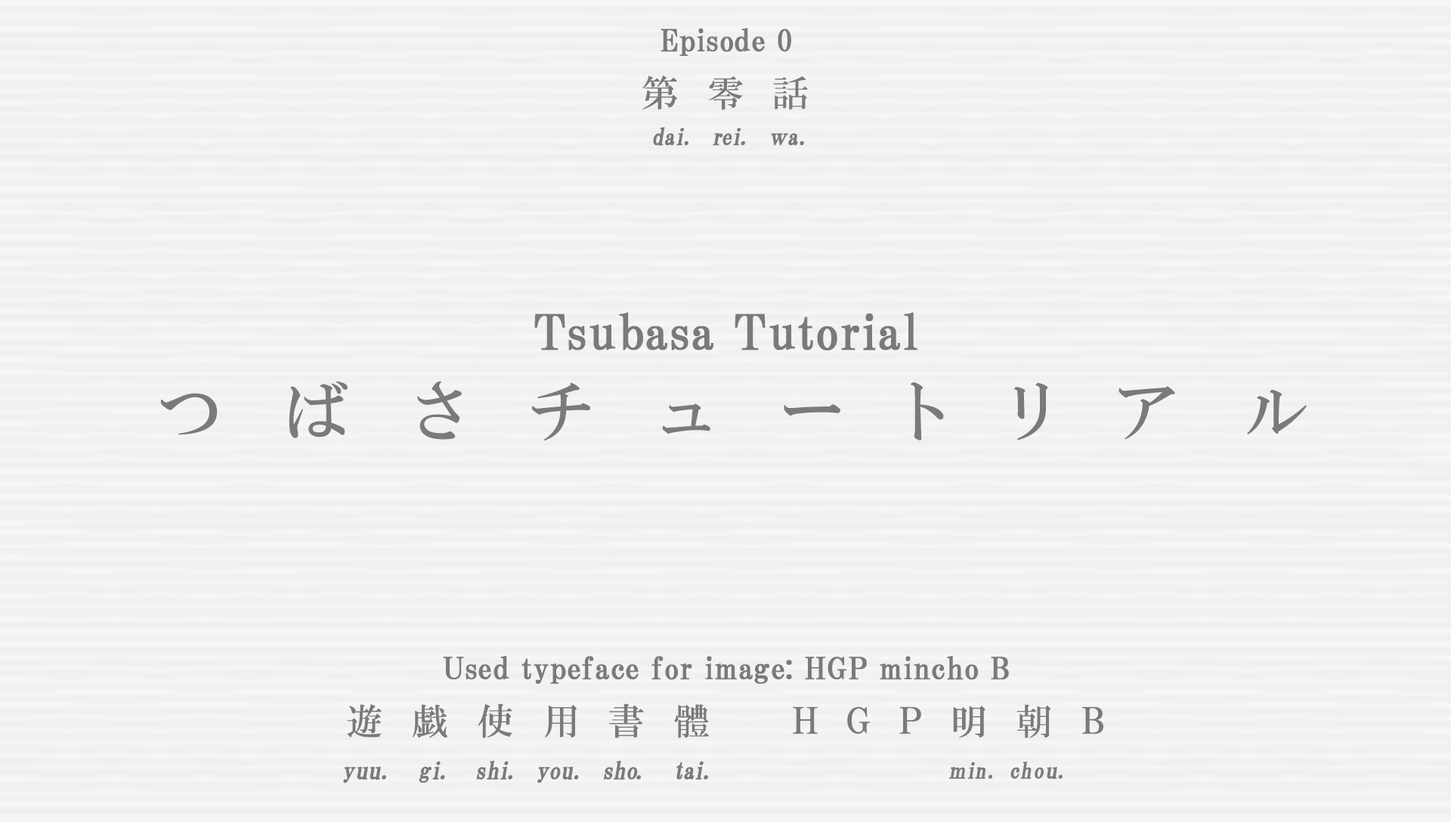
<style>
.page{position:relative;width:1451px;height:822px;background:#f0f0f0}
.page>*{position:absolute;margin:0}
.t1{font:30.2px "HGPMinchoB";letter-spacing:0.01em;color:#7a7a7a;font-weight:bold}
.t2{font:36.5px "HGMinchoB";letter-spacing:0.79em;color:#7a7a7a}
.t3{font:23.2px "HGMinchoB";letter-spacing:-0.1em;color:#7a7a7a;font-weight:bold;scale:0.96 1}
.t4{font:23.2px "HGMinchoB";color:#7a7a7a;font-weight:bold;scale:0.96 1}
.t5{font:23.2px "HGMinchoB";letter-spacing:-0.075em;color:#7a7a7a;font-weight:bold;scale:0.96 1}
.t6{font:23.2px "HGMinchoB";letter-spacing:0.07em;color:#7a7a7a;font-weight:bold;scale:0.96 1}
.t7{font:23.2px "HGMinchoB";letter-spacing:-0.05em;color:#7a7a7a;font-weight:bold;scale:0.86 1}
.t8{font:48.4px "HGPMinchoB";letter-spacing:0.01em;color:#7a7a7a;font-weight:bold}
.t9{font:65.7px "HGMinchoB";letter-spacing:0.91em;color:#7a7a7a}
.t10{font:65.7px "HGMinchoB";letter-spacing:0.93em;color:#7a7a7a}
.t11{font:65.7px "HGMinchoB";letter-spacing:0.89em;color:#7a7a7a}
.t12{font:65.7px "HGMinchoB";letter-spacing:0.83em;color:#7a7a7a}
.t13{font:65.7px "HGMinchoB";letter-spacing:0.68em;color:#7a7a7a}
.t14{font:65.7px "HGMinchoB";letter-spacing:0.72em;color:#7a7a7a}
.t15{font:65.7px "HGMinchoB";letter-spacing:0.96em;color:#7a7a7a}
.t16{font:36.3px "HGMinchoB";letter-spacing:0.81em;color:#7a7a7a}
.t17{font:36.3px "HGMinchoB";letter-spacing:0.8em;color:#7a7a7a}
.t18{font:36.3px "HGMinchoB";letter-spacing:0.79em;color:#7a7a7a}
.t19{font:36.3px "HGMinchoB";letter-spacing:0.71em;color:#7a7a7a;scale:0.85 1}
.t20{font:36.3px "HGMinchoB";letter-spacing:0.53em;color:#7a7a7a}
.t21{font:24.2px "HGMinchoB";color:#7a7a7a;font-weight:bold}
.t22{font:24.2px "HGMinchoB";letter-spacing:0.025em;color:#7a7a7a;font-weight:bold;scale:0.96 1}
.t23{font:24.2px "HGMinchoB";letter-spacing:0.075em;color:#7a7a7a;font-weight:bold;scale:0.96 1}
.t24{font:24.2px "HGMinchoB";letter-spacing:-0.025em;color:#7a7a7a;font-weight:bold;scale:0.96 1}
.t25{font:24.2px "HGMinchoB";letter-spacing:-0.11em;color:#7a7a7a;font-weight:bold;scale:0.96 1}
.t26{font:24.2px "HGMinchoB";color:#7a7a7a;font-weight:bold;scale:0.96 1}
.t27{font:24.2px "HGMinchoB";letter-spacing:-0.05em;color:#7a7a7a;font-weight:bold;scale:0.96 1}
.t28{font:24.2px "HGMinchoB";letter-spacing:-0.12em;color:#7a7a7a;font-weight:bold;scale:0.96 1}
.t29{font:24.2px "HGMinchoB";letter-spacing:-0.01em;color:#7a7a7a;font-weight:bold;scale:0.96 1}
.t30{font:24.2px "HGMinchoB";letter-spacing:0.005em;color:#7a7a7a;font-weight:bold;scale:0.96 1}
.t31{font:24.2px "HGMinchoB";letter-spacing:-0.09em;color:#7a7a7a;font-weight:bold;scale:0.96 1}
.t32{font:24.2px "HGMinchoB";letter-spacing:-0.075em;color:#7a7a7a;font-weight:bold;scale:0.96 1}
.t33{font:24.2px "HGMinchoB";letter-spacing:-0.1em;color:#7a7a7a;font-weight:bold;scale:0.96 1}
.t34{font:22px "HGMinchoB";letter-spacing:0.07em;color:#7a7a7a;font-weight:bold;scale:0.96 1}
.t35{font:22px "HGMinchoB";letter-spacing:-0.075em;color:#7a7a7a;font-weight:bold;scale:0.83 1}
.t36{font:22px "HGMinchoB";letter-spacing:-0.075em;color:#7a7a7a;font-weight:bold;scale:0.96 1}
.t37{font:22px "HGMinchoB";color:#7a7a7a;font-weight:bold;scale:0.96 1}
.t38{font:22px "HGMinchoB";letter-spacing:0.05em;color:#7a7a7a;font-weight:bold;scale:0.96 1}
.t39{font:22px "HGMinchoB";letter-spacing:0.01em;color:#7a7a7a;font-weight:bold;scale:1.06 1}
</style>
<div class="page">
<p class="t1" style="left:660px;top:28px;width:131px;height:28px">Episode 0</p>
<p class="t2" style="left:642px;top:76px;width:166px;height:34px">第零話</p>
<p class="t3" style="left:653px;top:127px;width:151px;height:19px"><span class="t4">d</span><span class="t5">a</span>i<span class="t6">. </span>rei<span class="t6">. </span><span class="t7">ｗ</span><span class="t4">a</span><span class="t6">.</span></p>
<p class="t8" style="left:534px;top:312px;width:383px;height:39px">Tsubasa Tutorial</p>
<p class="t9" style="left:161px;top:381px;width:1145px;height:60px"><span class="t10">つ</span><span class="t11">ば</span><span class="t12">さ</span>チュ<span class="t13">ート</span><span class="t14">リ</span><span class="t15">ア</span><span class="t12">ル</span></p>
<p class="t1" style="left:443px;top:656px;width:566px;height:28px">Used typeface for image: HGP mincho B</p>
<p class="t16" style="left:347px;top:703px;width:362px;height:35px">遊<span class="t17">戯</span>使<span class="t18">用</span>書體</p>
<p class="t19" style="left:793px;top:706px;width:310px;height:28px">ＨＧＰ    Ｂ</p>
<p class="t18" style="left:953px;top:704px;width:97px;height:34px">明<span class="t20">朝</span></p>
<p class="t21" style="left:343px;top:760px;width:365px;height:23px"><span class="t22">y</span>uu<span class="t23">. </span><span class="t24">g</span><span class="t25">i</span><span class="t23">. </span><span class="t26">s</span><span class="t27">h</span><span class="t28">i</span><span class="t23">. </span><span class="t29">y</span><span class="t30">ou</span><span class="t23">. </span><span class="t24">s</span><span class="t26">h</span><span class="t31">o</span><span class="t23">.  </span><span class="t32">t</span><span class="t33">ai</span><span class="t23">.</span></p>
<p class="t34" style="left:949px;top:761px;width:113px;height:19px"><span class="t35">ｍ</span><span class="t36">i</span>n. <span class="t37">c</span>h<span class="t38">o</span><span class="t39">u</span>.</p>
</div>
